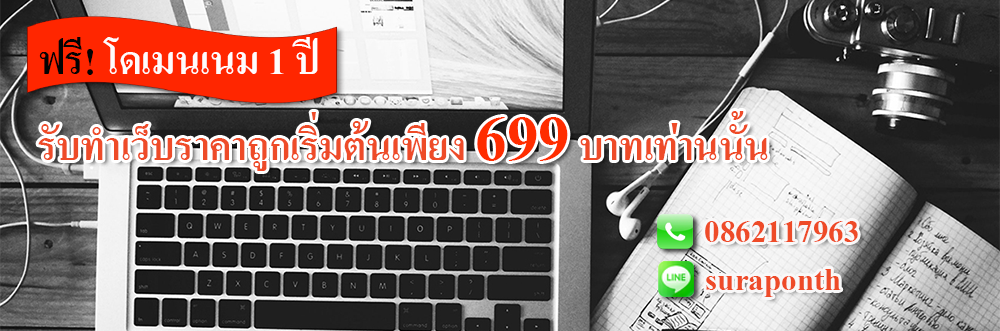
<style>
.page{position:relative;width:1000px;height:331px}
.page>*{position:absolute;margin:0}
.t1{font:55px "AngsanaUPC-Bold";color:#fefcfc}
.t2{font:55px "AngsanaUPC-Bold";color:#030303}
.t3{font:55px "AngsanaUPC-Bold";color:#ee4b28}
.t4{font:96px "AngsanaUPC-Bold";color:#ff2d00}
.t5{font:47px "AngsanaUPC-Bold";color:#ee4b28}
</style>
<div class="page">
<p class="t1" style="left:39px;top:37px;width:279px;height:38px"><span class="t2">ฟรี! </span>โดเมนเนม 1 ปี</p>
<p class="t3" style="left:38px;top:111px;width:730px;height:60px">รับทำเว็บราคาถูกเริ่มต้นเพียง <span class="t4">699</span> บาทเท่านนั้น</p>
<p class="t5" style="left:705px;top:221px;width:153px;height:21px">0862117963</p>
<p class="t5" style="left:706px;top:269px;width:135px;height:28px">suraponth</p>
</div>
